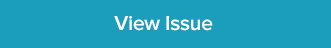
<style>
.page{position:relative;width:331px;height:48px;background:#1b9ebc}
.page>*{position:absolute;margin:0}
.t1{font:21px "ProximaNova-Semibold";letter-spacing:-0.012em;color:#ffffff}
</style>
<div class="page">
<p class="t1" style="left:114px;top:16px;width:99px;height:15px">View Issue</p>
</div>
